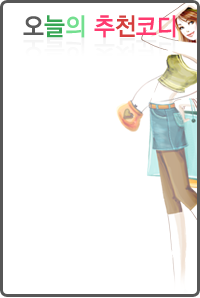
<style>
.page{position:relative;width:200px;height:298px;background:#ffffff}
.page>*{position:absolute;margin:0}
.t1{font:25.2px "YDIYGO340";color:#ff3a6f;scale:0.9 1}
.t2{font:25.2px "YDIYGO340";color:#5b5b5b;scale:0.9 1}
.t3{font:25.2px "YDIYGO340";color:#37a654;scale:0.9 1}
.t4{font:25.2px "YDIYGO340";color:#73df8f;scale:0.9 1}
.t5{font:25.2px "YDIYGO340";color:#d43e3d;scale:0.9 1}
</style>
<div class="page">
<p class="t1" style="left:23px;top:15px;width:153px;height:23px"><span class="t2">오</span><span class="t3">늘</span><span class="t4">의</span> 추<span class="t5">천</span>코디</p>
</div>
